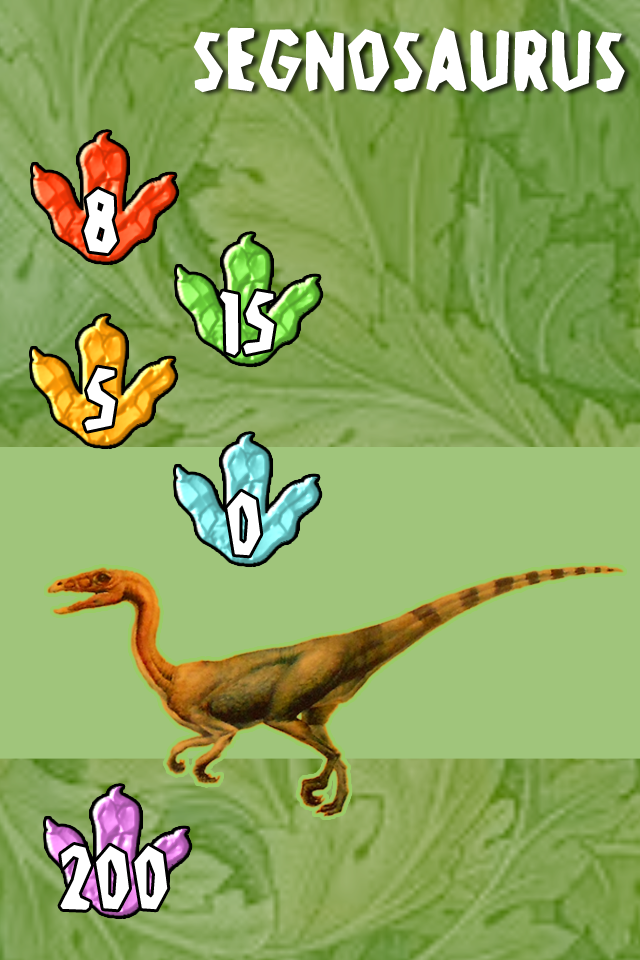
<style>
.page{position:relative;width:640px;height:960px;background:#a0c57b}
.page>*{position:absolute;margin:0}
.t1{font:96px "Stone-Age";color:#ffffff}
</style>
<div class="page">
<p class="t1" style="left:193px;top:27px;width:432px;height:66px">Segnosaurus</p>
<p class="t1" style="left:84px;top:189px;width:33px;height:65px">8</p>
<p class="t1" style="left:220px;top:291px;width:55px;height:65px">15</p>
<p class="t1" style="left:84px;top:367px;width:32px;height:64px">5</p>
<p class="t1" style="left:227px;top:491px;width:34px;height:65px">0</p>
<p class="t1" style="left:60px;top:845px;width:108px;height:65px">200</p>
</div>
